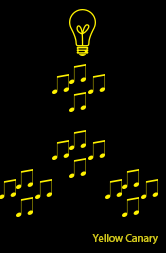
<style>
.page{position:relative;width:166px;height:253px;background:#000000}
.page>*{position:absolute;margin:0}
.t1{font:11.1px "MyriadPro-Regular";color:#d0c61e}
</style>
<div class="page">
<p class="t1" style="left:92px;top:234px;width:66px;height:10px">Yellow Canary</p>
</div>
